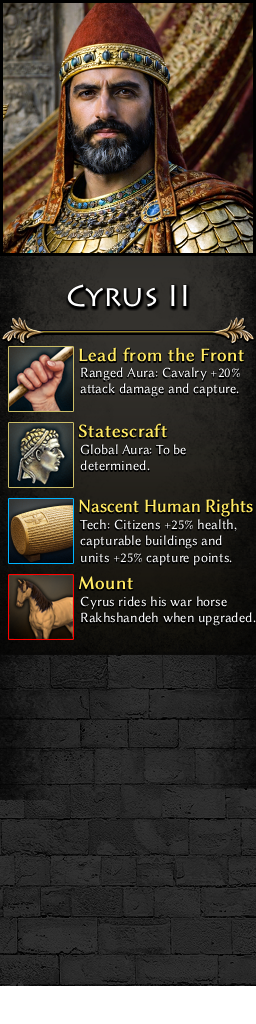
<style>
.page{position:relative;width:256px;height:1024px}
.page>*{position:absolute;margin:0}
.t1{font:30px "Lithos";color:#ffffff}
.t2{font:19px "LinBiolinumO";color:#ffe963;font-weight:bold}
.t3{font:14px "LinBiolinumO";color:#ffffff}
.t4{font:19px "LinBiolinumO";letter-spacing:-0.02em;color:#ffe963;font-weight:bold;scale:0.95 1}
</style>
<div class="page">
<p class="t1" style="left:67px;top:284px;width:120px;height:23px">Cyrus II</p>
<p class="t2" style="left:79px;top:347px;width:165px;height:15px">Lead from the Front</p>
<p class="t3" style="left:80px;top:367px;width:160px;height:30px">Ranged Aura: Cavalry +20% <br>attack damage and capture.</p>
<p class="t2" style="left:78px;top:423px;width:89px;height:15px">Statescraft</p>
<p class="t3" style="left:80px;top:444px;width:106px;height:27px">Global Aura: To be <br>determined.</p>
<p class="t4" style="left:79px;top:498px;width:174px;height:19px">Nascent Human Rights</p>
<p class="t3" style="left:80px;top:519px;width:157px;height:47px">Tech: Citizens +25% health,<br>capturable buildings and <br>units +25% capture points.</p>
<p class="t2" style="left:78px;top:576px;width:55px;height:14px">Mount</p>
<p class="t3" style="left:80px;top:596px;width:176px;height:30px">Cyrus rides his war horse<br>Rakhshandeh when upgraded.</p>
</div>
